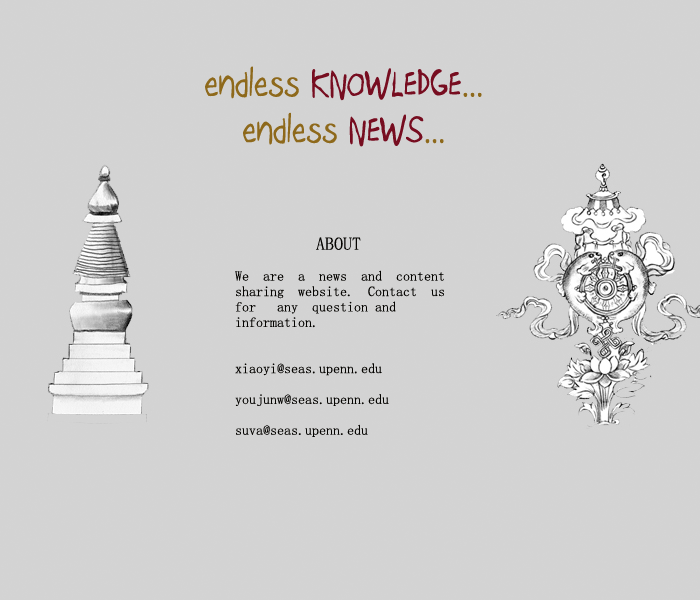
<style>
.page{position:relative;width:700px;height:600px;background:#d3d3d3}
.page>*{position:absolute;margin:0}
.t1{font:41.1px/15.4px "Boopee";color:#8e691b}
.t2{font:41.1px/15.4px "Boopee";color:#770d20}
.t3{font:14px/15.4px "SimSun";color:#050401}
.t4{font:18px/15.4px "SimSun";color:#050401}
</style>
<div class="page">
<p class="t1" style="left:205px;top:66px;width:277px;height:81px;text-align:center">endless <span class="t2">KNOWLEDGE</span>...<br><br><br>endless <span class="t2">NEWS</span>...</p>
<p class="t3" style="left:235px;top:237px;width:209px;height:200px"><span class="t4">         ABOUT<br></span><br>We  are  a  news  and  content <br>sharing  website.  Contact  us <br>for   any  question and  <br>information.<br><br><br>xiaoyi@seas.upenn.edu <br><br>youjunw@seas.upenn.edu <br><br>suva@seas.upenn.edu</p>
</div>
